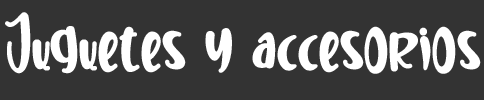
<style>
.page{position:relative;width:484px;height:100px;background:#333333}
.page>*{position:absolute;margin:0}
.t1{font:54.5px "SweetUnicorn";color:#ffffff}
</style>
<div class="page">
<p class="t1" style="left:5px;top:12px;width:476px;height:62px">Juguetes y accesorios</p>
</div>
